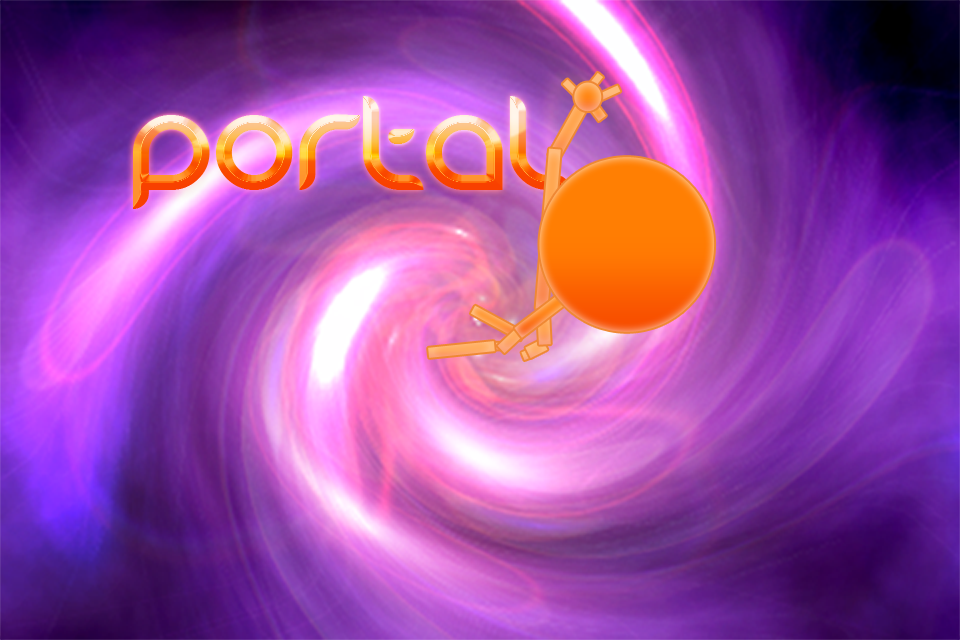
<style>
.page{position:relative;width:960px;height:640px}
.page>*{position:absolute;margin:0}
.t1{font:94.3px "Danube"}
</style>
<div class="page">
<p class="t1" style="left:133px;top:96px;width:438px;height:113px">Portal</p>
</div>
